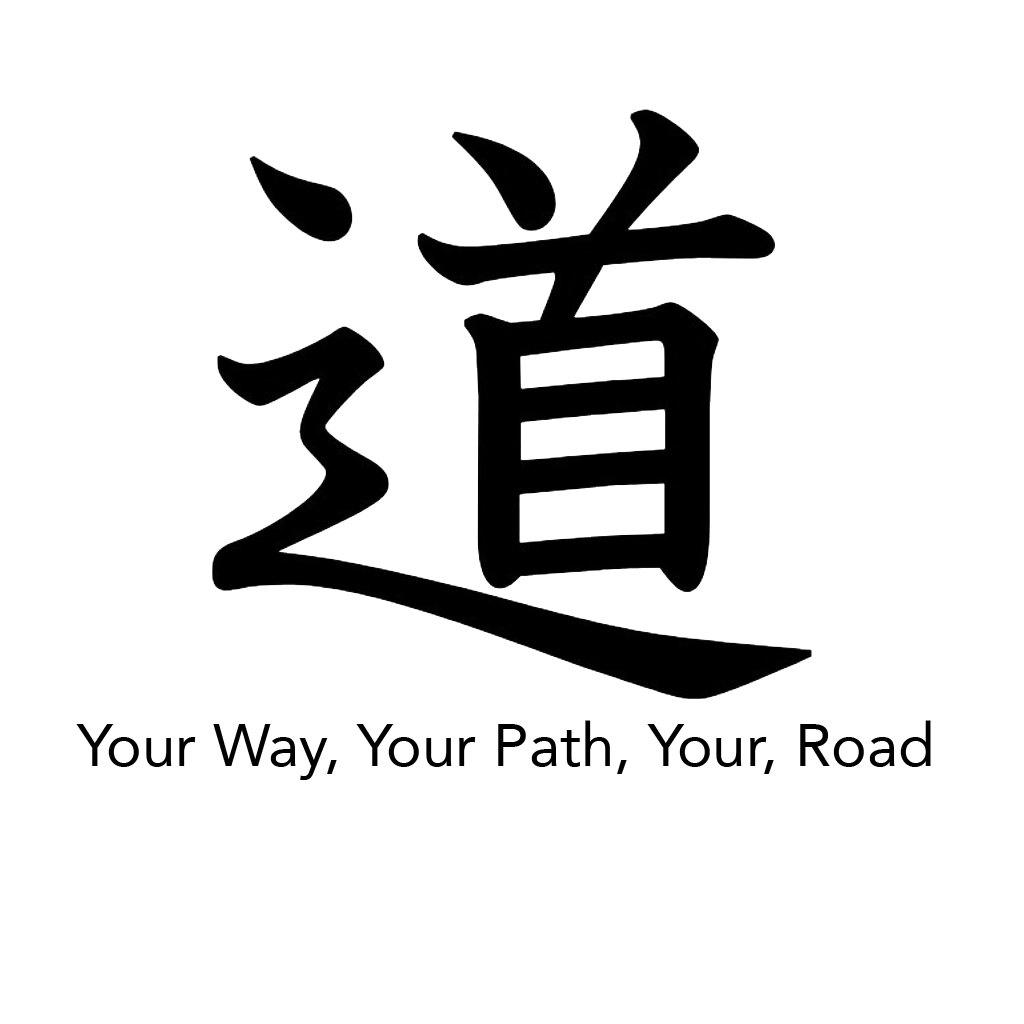
<style>
.page{position:relative;width:1024px;height:1024px;background:#ffffff}
.page>*{position:absolute;margin:0}
.t1{font:60px "Avenir-Roman";color:#000000}
</style>
<div class="page">
<p class="t1" style="left:76px;top:720px;width:855px;height:60px">Your Way, Your Path, Your, Road Road</p>
</div>
